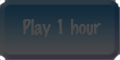
<style>
.page{position:relative;width:120px;height:60px}
.page>*{position:absolute;margin:0}
.t1{font:18px "MarkerFelt-Thin";color:#4c4c4c}
</style>
<div class="page">
<p class="t1" style="left:23px;top:19px;width:78px;height:18px">Play 1 hour</p>
</div>
